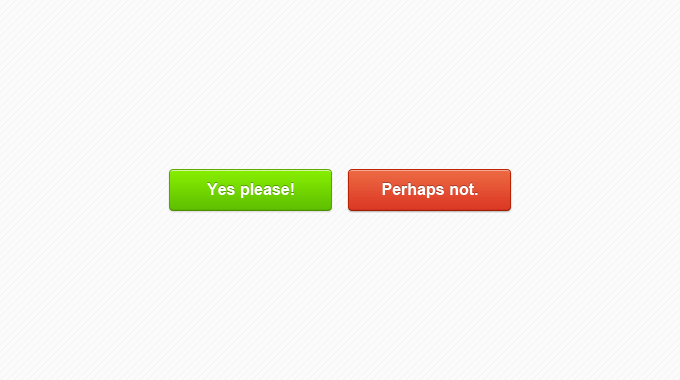
<style>
.page{position:relative;width:680px;height:380px;background:#fbfbfb}
.page>*{position:absolute;margin:0}
.t1{font:16px "Arial-BoldMT";color:#fcfcfc}
.t2{font:16px "Arial-BoldMT";color:#ffffff}
</style>
<div class="page">
<p class="t1" style="left:207px;top:183px;width:87px;height:15px">Yes please!</p>
<p class="t2" style="left:382px;top:183px;width:96px;height:15px">Perhaps not.</p>
</div>
